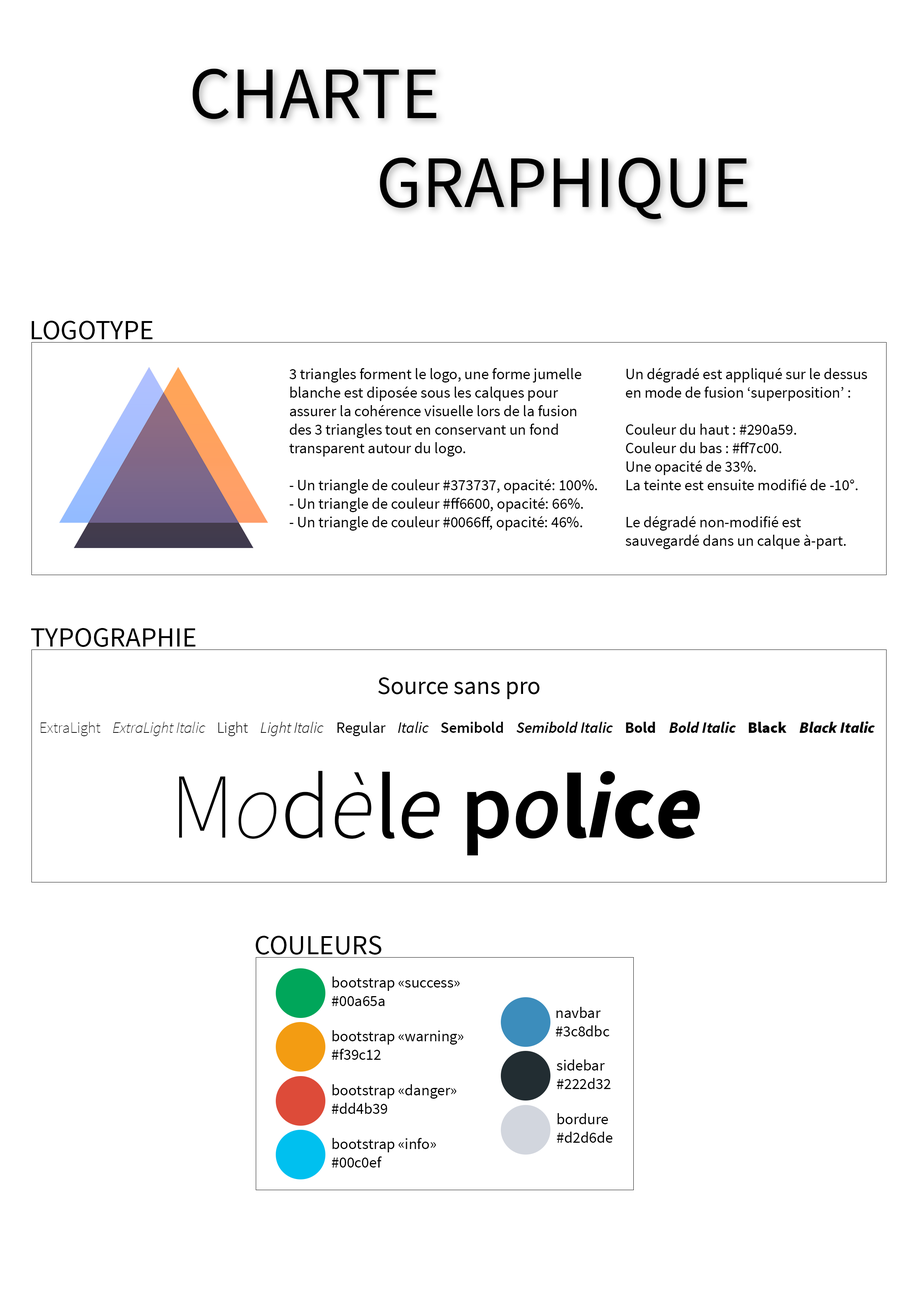
<style>
.page{position:relative;width:918px;height:1299px;background:#ffffff}
.page>*{position:absolute;margin:0}
.t1{font:74px "SourceSansPro-Regular";color:#000000}
.t2{font:27.8px "SourceSansPro-Regular";color:#000000}
.t3{font:15.4px "SourceSansPro-Regular";color:#000000}
.t4{font:15.4px "SourceSansPro-ExtraLightIt";color:#000000}
.t5{font:24.7px "SourceSansPro-Regular";color:#000000}
.t6{font:15.4px "SourceSansPro-ExtraLight";color:#000000}
.t7{font:15.4px "SourceSansPro-Light";color:#000000}
.t8{font:15.4px "SourceSansPro-LightIt";color:#000000}
.t9{font:15.4px "SourceSansPro-It";color:#000000}
.t10{font:15.4px "SourceSansPro-Semibold";color:#000000}
.t11{font:15.4px "SourceSansPro-SemiboldIt";color:#000000}
.t12{font:15.4px "SourceSansPro-Bold";color:#000000}
.t13{font:15.4px "SourceSansPro-BoldIt";color:#000000}
.t14{font:15.4px "SourceSansPro-Black";color:#000000}
.t15{font:15.4px "SourceSansPro-BlackIt";color:#000000}
.t16{font:92.6px "SourceSansPro-ExtraLight";color:#000000}
.t17{font:92.6px "SourceSansPro-ExtraLightIt";color:#000000}
.t18{font:92.6px "SourceSansPro-Light";color:#000000}
.t19{font:92.6px "SourceSansPro-LightIt";color:#000000}
.t20{font:92.6px "SourceSansPro-Regular";color:#000000}
.t21{font:92.6px "SourceSansPro-It";color:#000000}
.t22{font:92.6px "SourceSansPro-Semibold";color:#000000}
.t23{font:92.6px "SourceSansPro-SemiboldIt";color:#000000}
.t24{font:92.6px "SourceSansPro-Bold";color:#000000}
.t25{font:92.6px "SourceSansPro-BoldIt";color:#000000}
.t26{font:92.6px "SourceSansPro-Black";color:#000000}
.t27{font:92.6px "SourceSansPro-BlackIt";color:#000000}
</style>
<div class="page">
<p class="t1" style="left:193px;top:68px;width:554px;height:151px">CHARTE<br>GRAPHIQUE</p>
<p class="t2" style="left:31px;top:321px;width:122px;height:18px">LOGOTYPE</p>
<p class="t3" style="left:290px;top:368px;width:307px;height:163px">3 triangles forment le logo, une forme jumelle blanche est diposée sous les calques pour<br>assurer la cohérence visuelle lors de la fusion des 3 triangles tout en conservant un fond<br>transparent autour du logo.<br><br>- Un triangle de couleur #373737, opacité: 100%.<br>- Un triangle de couleur #ff6600, opacité: 66%.<br>- Un triangle de couleur #0066ff, opacité: 46%.</p>
<p class="t3" style="left:626px;top:368px;width:241px;height:181px">Un dégradé est appliqué sur le dessus<br>en mode de fusion ‘superposition’ : <br><br>Couleur du haut : #290a59.<br>Couleur du bas : #ff7c00.<br>Une opacité de 33%.<br>La teinte est ensuite modifié de -10°.<br><br>Le dégradé non-modifié est<br>sauvegardé dans un calque à-part.</p>
<p class="t2" style="left:31px;top:628px;width:164px;height:19px">TYPOGRAPHIE</p>
<p class="t4" style="left:41px;top:677px;width:834px;height:59px;text-align:center"><span class="t5">Source sans pro<br><br></span><span class="t6">ExtraLight    </span>ExtraLight Italic    <span class="t7">Light    </span><span class="t8">Light Italic</span><span class="t3">    Regular</span><span class="t9">    Italic    </span><span class="t10">Semibold    </span><span class="t11">Semibold Italic    </span><span class="t12">Bold    </span><span class="t13">Bold Italic    </span><span class="t14">Black    </span><span class="t15">Black Italic</span></p>
<p class="t16" style="left:179px;top:770px;width:521px;height:85px">M<span class="t17">o</span><span class="t18">d</span><span class="t19">è</span><span class="t20">l</span><span class="t21">e </span><span class="t22">p</span><span class="t23">o</span><span class="t24">l</span><span class="t25">i</span><span class="t26">c</span><span class="t27">e</span></p>
<p class="t2" style="left:255px;top:936px;width:127px;height:18px">COULEURS</p>
<p class="t3" style="left:332px;top:976px;width:128px;height:30px">bootstrap «success»<br>#00a65a</p>
<p class="t3" style="left:556px;top:1007px;width:54px;height:29px">navbar<br>#3c8dbc</p>
<p class="t3" style="left:332px;top:1030px;width:132px;height:30px">bootstrap «warning»<br>#f39c12</p>
<p class="t3" style="left:557px;top:1059px;width:53px;height:30px">sidebar<br>#222d32</p>
<p class="t3" style="left:332px;top:1084px;width:124px;height:30px">bootstrap «danger»<br>#dd4b39</p>
<p class="t3" style="left:557px;top:1113px;width:56px;height:30px">bordure<br>#d2d6de</p>
<p class="t3" style="left:332px;top:1138px;width:104px;height:29px">bootstrap «info»<br>#00c0ef</p>
</div>
